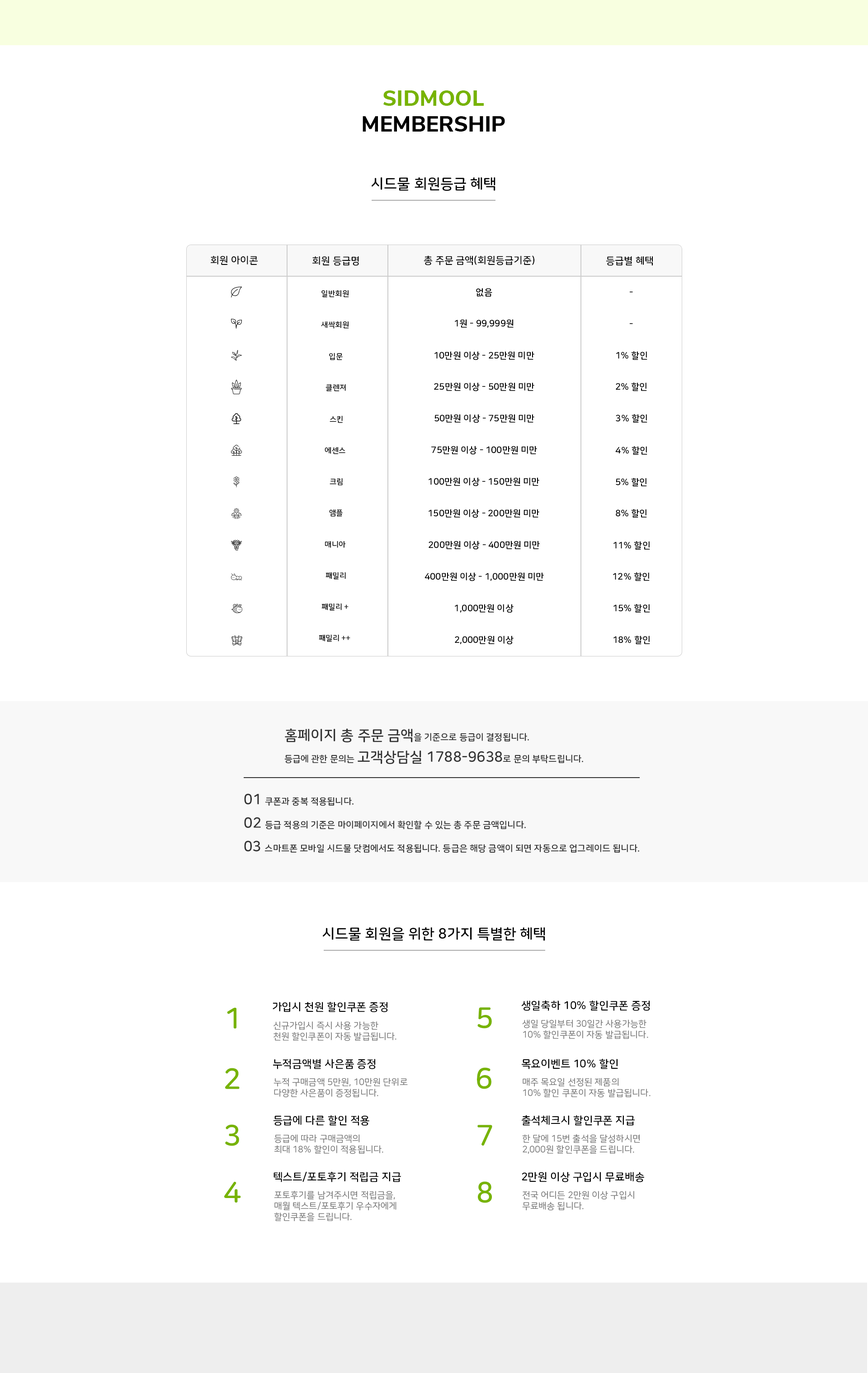
<style>
.page{position:relative;width:868px;height:1373px;background:#ffffff}
.page>*{position:absolute;margin:0}
.t1{font:21.7px "NunitoSans-ExtraBold";color:#000000}
.t2{font:21.7px "NunitoSans-ExtraBold";color:#77b300}
.t3{font:14.5px "NanumSquareRoundOTFB";color:#000000}
.t4{font:9.9px "NanumSquareRoundOTFB";color:#000000}
.t5{font:7.7px "NanumSquareRoundOTFB";color:#000000}
.t6{font:9px "NanumSquareRoundOTFB";color:#000000}
.t7{font:9px/21.7px "NanumSquareRoundOTFB";color:#333333}
.t8{font:14.5px/21.7px "NanumSquareRoundOTFB";color:#333333}
.t9{font:9px "NanumSquareRoundOTFB";color:#333333}
.t10{font:14.5px "NanumSquareRoundOTFB";color:#333333}
.t11{font:10.9px "NanumSquareRoundOTFB";color:#000000}
.t12{font:28.9px "NanumSquareRoundOTFB";color:#77b300}
.t13{font:9px "NanumSquareRoundOTFR";color:#777777}
</style>
<div class="page">
<p class="t1" style="left:363px;top:90px;width:142px;height:42px;text-align:center"><span class="t2">SIDMOOL<br></span>MEMBERSHIP</p>
<p class="t3" style="left:371px;top:177px;width:125px;height:14px">시드물 회원등급 혜택</p>
<p class="t4" style="left:211px;top:256px;width:47px;height:9px">회원 아이콘</p>
<p class="t4" style="left:312px;top:256px;width:47px;height:10px">회원 등급명</p>
<p class="t4" style="left:424px;top:256px;width:111px;height:9px">총 주문 금액(회원등급기준)</p>
<p class="t4" style="left:606px;top:256px;width:47px;height:10px">등급별 혜택</p>
<p class="t5" style="left:322px;top:290px;width:27px;height:8px">일반회원</p>
<p class="t6" style="left:476px;top:288px;width:16px;height:9px">없음</p>
<p class="t6" style="left:629px;top:291px;width:4px;height:2px">-</p>
<p class="t5" style="left:321px;top:321px;width:28px;height:8px">새싹회원</p>
<p class="t6" style="left:455px;top:319px;width:59px;height:9px">1원 - 99,999원</p>
<p class="t6" style="left:629px;top:323px;width:4px;height:1px">-</p>
<p class="t5" style="left:329px;top:353px;width:14px;height:7px">입문</p>
<p class="t6" style="left:435px;top:351px;width:100px;height:9px">10만원 이상 - 25만원 미만</p>
<p class="t6" style="left:616px;top:351px;width:32px;height:9px">1% 할인</p>
<p class="t5" style="left:326px;top:384px;width:20px;height:8px">클렌져</p>
<p class="t6" style="left:434px;top:383px;width:101px;height:9px">25만원 이상 - 50만원 미만</p>
<p class="t6" style="left:616px;top:383px;width:31px;height:8px">2% 할인</p>
<p class="t5" style="left:330px;top:416px;width:13px;height:7px">스킨</p>
<p class="t6" style="left:435px;top:414px;width:100px;height:9px">50만원 이상 - 75만원 미만</p>
<p class="t6" style="left:616px;top:414px;width:32px;height:9px">3% 할인</p>
<p class="t5" style="left:325px;top:447px;width:20px;height:7px">에센스</p>
<p class="t6" style="left:431px;top:446px;width:106px;height:9px">75만원 이상 - 100만원 미만</p>
<p class="t6" style="left:615px;top:446px;width:33px;height:9px">4% 할인</p>
<p class="t5" style="left:330px;top:478px;width:13px;height:8px">크림</p>
<p class="t6" style="left:429px;top:478px;width:110px;height:9px">100만원 이상 - 150만원 미만</p>
<p class="t6" style="left:616px;top:478px;width:31px;height:9px">5% 할인</p>
<p class="t5" style="left:329px;top:509px;width:14px;height:8px">앰플</p>
<p class="t6" style="left:429px;top:509px;width:110px;height:9px">150만원 이상 - 200만원 미만</p>
<p class="t6" style="left:616px;top:509px;width:31px;height:9px">8% 할인</p>
<p class="t5" style="left:325px;top:541px;width:21px;height:7px">매니아</p>
<p class="t6" style="left:429px;top:541px;width:111px;height:9px">200만원 이상 - 400만원 미만</p>
<p class="t6" style="left:614px;top:541px;width:36px;height:9px">11% 할인</p>
<p class="t5" style="left:326px;top:572px;width:20px;height:8px">패밀리</p>
<p class="t6" style="left:425px;top:573px;width:119px;height:9px">400만원 이상 - 1,000만원 미만</p>
<p class="t6" style="left:613px;top:573px;width:37px;height:8px">12% 할인</p>
<p class="t5" style="left:322px;top:603px;width:27px;height:8px">패밀리 +</p>
<p class="t6" style="left:455px;top:604px;width:59px;height:9px">1,000만원 이상</p>
<p class="t6" style="left:614px;top:604px;width:36px;height:9px">15% 할인</p>
<p class="t5" style="left:319px;top:634px;width:31px;height:8px">패밀리 ++</p>
<p class="t6" style="left:455px;top:636px;width:59px;height:9px">2,000만원 이상</p>
<p class="t6" style="left:614px;top:636px;width:36px;height:8px">18% 할인</p>
<p class="t7" style="left:284px;top:729px;width:299px;height:35px"><span class="t8">홈페이지 총 주문 금액</span>을 기준으로 등급이 결정됩니다.<br>등급에 관한 문의는 <span class="t8">고객상담실 1788-9638</span>로 문의 부탁드립니다.</p>
<p class="t9" style="left:244px;top:794px;width:110px;height:12px"><span class="t10">01 </span>쿠폰과 중복 적용됩니다.</p>
<p class="t9" style="left:244px;top:817px;width:282px;height:13px"><span class="t10">02 </span>등급 적용의 기준은 마이페이지에서 확인할 수 있는 총 주문 금액입니다.</p>
<p class="t9" style="left:244px;top:841px;width:395px;height:12px"><span class="t10">03 </span>스마트폰 모바일 시드물 닷컴에서도 적용됩니다. 등급은 해당 금액이 되면 자동으로 업그레이드 됩니다.</p>
<p class="t3" style="left:322px;top:927px;width:223px;height:14px">시드물 회원을 위한 8가지 특별한 혜택</p>
<p class="t11" style="left:273px;top:1002px;width:115px;height:11px">가입시 천원 할인쿠폰 증정</p>
<p class="t11" style="left:521px;top:1000px;width:129px;height:11px">생일축하 10% 할인쿠폰 증정</p>
<p class="t12" style="left:227px;top:1008px;width:10px;height:21px">1</p>
<p class="t12" style="left:478px;top:1008px;width:14px;height:21px">5</p>
<p class="t13" style="left:274px;top:1022px;width:123px;height:19px">신규가입시 즉시 사용 가능한<br>천원 할인쿠폰이 자동 발급됩니다.</p>
<p class="t13" style="left:522px;top:1020px;width:126px;height:20px">생일 당일부터 30일간 사용가능한<br>10% 할인쿠폰이 자동 발급됩니다.</p>
<p class="t11" style="left:273px;top:1059px;width:103px;height:10px">누적금액별 사은품 증정</p>
<p class="t11" style="left:521px;top:1059px;width:97px;height:10px">목요이벤트 10% 할인</p>
<p class="t12" style="left:225px;top:1068px;width:15px;height:21px">2</p>
<p class="t12" style="left:477px;top:1068px;width:15px;height:21px">6</p>
<p class="t13" style="left:274px;top:1078px;width:134px;height:20px">누적 구매금액 5만원, 10만원 단위로<br>다양한 사은품이 증정됩니다.</p>
<p class="t13" style="left:523px;top:1078px;width:128px;height:20px">매주 목요일 선정된 제품의<br>10% 할인 쿠폰이 자동 발급됩니다.</p>
<p class="t11" style="left:273px;top:1115px;width:96px;height:11px">등급에 다른 할인 적용</p>
<p class="t11" style="left:521px;top:1115px;width:114px;height:11px">출석체크시 할인쿠폰 지급</p>
<p class="t12" style="left:225px;top:1125px;width:14px;height:21px">3</p>
<p class="t12" style="left:478px;top:1125px;width:14px;height:21px">7</p>
<p class="t13" style="left:274px;top:1135px;width:109px;height:20px">등급에 따라 구매금액의<br>최대 18% 할인이 적용됩니다.</p>
<p class="t13" style="left:522px;top:1134px;width:118px;height:21px">한 달에 15번 출석을 달성하시면<br>2,000원 할인쿠폰을 드립니다.</p>
<p class="t11" style="left:274px;top:1172px;width:127px;height:11px">텍스트/포토후기 적립금 지급</p>
<p class="t12" style="left:478px;top:1182px;width:14px;height:21px">8</p>
<p class="t11" style="left:522px;top:1172px;width:122px;height:11px">2만원 이상 구입시 무료배송</p>
<p class="t12" style="left:224px;top:1182px;width:17px;height:21px">4</p>
<p class="t13" style="left:274px;top:1191px;width:123px;height:31px">포토후기를 남겨주시면 적립금을,<br>매월 텍스트/포토후기 우수자에게<br>할인쿠폰을 드립니다.</p>
<p class="t13" style="left:522px;top:1191px;width:112px;height:20px">전국 어디든 2만원 이상 구입시<br>무료배송 됩니다.</p>
</div>
